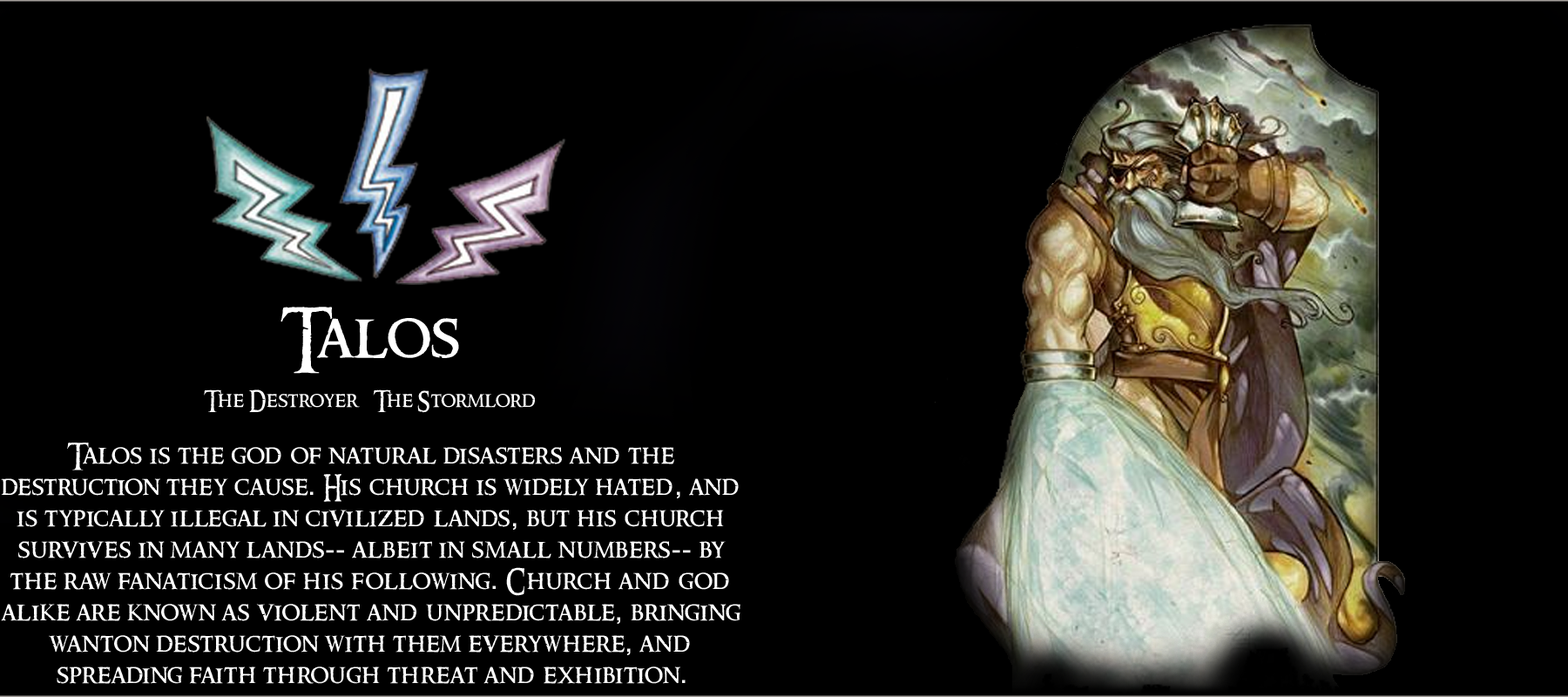
<style>
.page{position:relative;width:1568px;height:697px;background:#000000}
.page>*{position:absolute;margin:0}
.t1{font:26.1px "RingbearerMedium";letter-spacing:0.025em;color:#ffffff}
.t2{font:62.7px "RingbearerMedium";letter-spacing:0.025em;color:#ffffff}
.t3{font:20.9px "RingbearerMedium";letter-spacing:0.025em;color:#ffffff}
.t4{font:26.1px "Rockwell";letter-spacing:0.025em;color:#ffffff}
</style>
<div class="page">
<p class="t1" style="left:1px;top:307px;width:739px;height:377px;text-align:center"><span class="t2">Talos<br></span><span class="t3"><br>The Destroyer   The Stormlord<br><br></span>Talos is the god of natural disasters and the <br>destruction they cause<span class="t4">.</span> His church is widely hated<span class="t4">,</span> and is typically illegal in civilized lands<span class="t4">,</span> but his church <br>survives in many lands<span class="t4">--</span> albeit in small numbers<span class="t4">--</span> by the raw fanaticism of his following<span class="t4">.</span> Church and god alike are known as violent and unpredictable<span class="t4">,</span> bringing wanton destruction with them everywhere<span class="t4">,</span> and <br>spreading faith through threat and exhibition<span class="t4">.</span></p>
</div>
